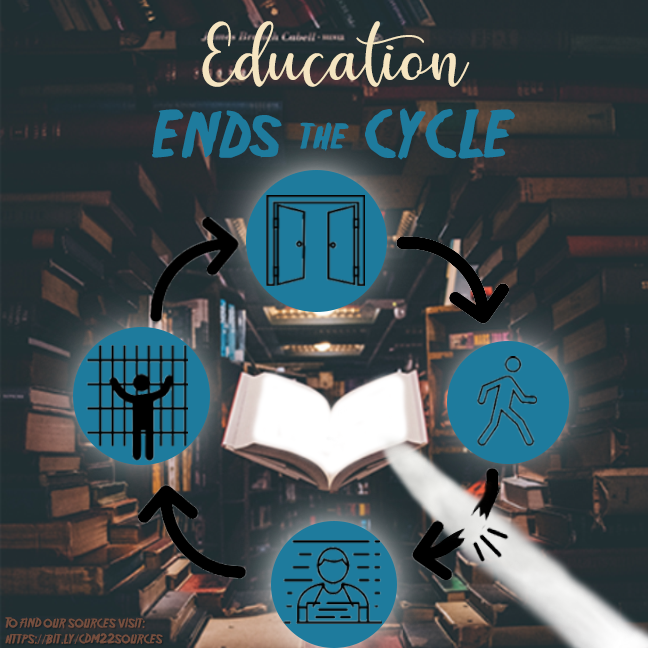
<style>
.page{position:relative;width:648px;height:648px}
.page>*{position:absolute;margin:0}
.t1{font:60px/36px "Friday13";color:#1e7b9d}
.t2{font:80px/36px "HelloRegular";color:#f5e5c1}
.t3{font:36px "Friday13";color:#1e7b9d}
.t4{font:13px "Friday13";color:#754e3e}
.t5{font:13px "MyriadPro-Regular";color:#754e3e}
</style>
<div class="page">
<p class="t1" style="left:152px;top:21px;width:363px;height:139px;text-align:center"><span class="t2">Education <br><br></span>ENDs       CYCLE</p>
<p class="t3" style="left:300px;top:122px;width:49px;height:29px">the</p>
<p class="t4" style="left:5px;top:617px;width:158px;height:28px">To find our sources visit: <br>https:<span class="t5">//</span>bit.ly<span class="t5">/</span>cdm22sources</p>
</div>
